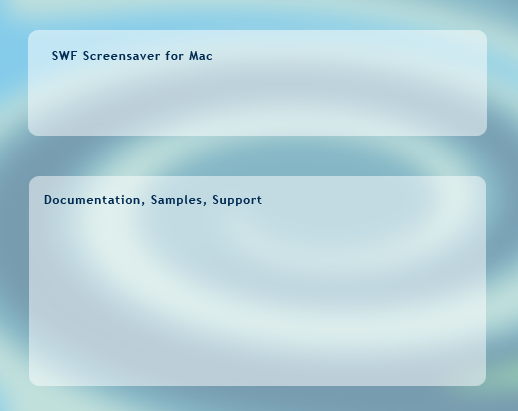
<style>
.page{position:relative;width:518px;height:411px}
.page>*{position:absolute;margin:0}
.t1{font:12px "TrebuchetMS-Bold";letter-spacing:0.075em;color:#002a52}
</style>
<div class="page">
<p class="t1" style="left:52px;top:51px;width:160px;height:9px">SWF Screensaver for Mac</p>
<p class="t1" style="left:44px;top:195px;width:218px;height:11px">Documentation, Samples, Support</p>
</div>
